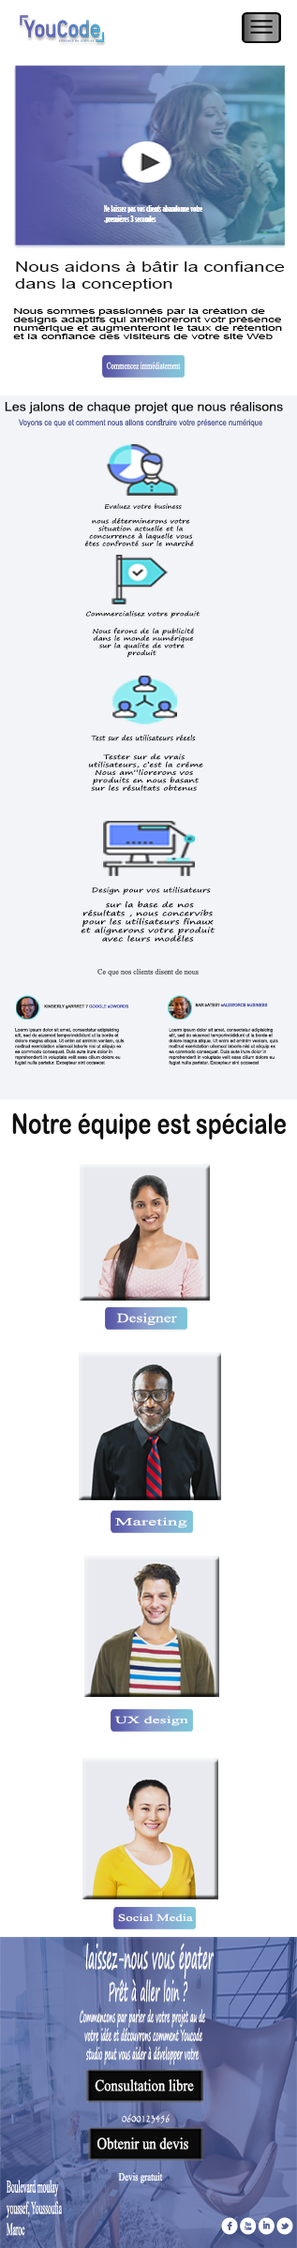
<style>
.page{position:relative;width:297px;height:2248px;background:#ffffff}
.page>*{position:absolute;margin:0}
.t1{font:8.5px "BernardMT-Condensed";color:#ffffff;scale:0.72 1}
.t2{font:14.2px "ArialMT";color:#111112;scale:1.34 1}
.t3{font:7px "ArialMT";color:#000000;scale:1.81 1}
.t4{font:9.5px "TimesNewRomanPSMT";color:#fdfafa;scale:0.67 1}
.t5{font:12.4px "ArialMT";color:#111112;scale:1.08 1}
.t6{font:8.3px "ArialMT";color:#464f98;scale:0.87 1}
.t7{font:5.8px "SegoePrint";color:#111112;scale:1.2 1}
.t8{font:6.3px "SegoePrint";color:#111112;scale:1.2 1}
.t9{font:6.1px "SegoePrint";color:#111112;scale:1.26 1}
.t10{font:6.9px "SegoePrint";color:#111112}
.t11{font:6.5px "SegoePrint";color:#111112;scale:1.34 1}
.t12{font:6.5px "SegoePrint";color:#111112;scale:1.31 1}
.t13{font:7.1px "SegoePrint";color:#111112;scale:1.39 1}
.t14{font:7.4px "TimesNewRomanPSMT";color:#3d3d3f}
.t15{font:4.1px "ArialMT";color:#1e2ea7}
.t16{font:4.1px "ArialMT";color:#030303}
.t17{font:4.6px "ArialMT";color:#111112}
.t18{font:27.9px "ArialRoundedMTBold";color:#111112;scale:0.8 1}
.t19{font:27.9px "SegoePrint";color:#111112;scale:0.8 1}
.t20{font:12.8px "TimesNewRomanPSMT";color:#fdfafa;scale:1.29 1}
.t21{font:10.8px "TimesNewRomanPSMT";color:#fdfafa;scale:1.83 1}
.t22{font:9.9px "TimesNewRomanPSMT";color:#fdfafa;scale:1.71 1}
.t23{font:9.9px "TimesNewRomanPSMT";color:#fdfafa;scale:1.42 1}
.t24{font:30.9px "SegoePrint";color:#ffffff;scale:0.34 1}
.t25{font:26px "SegoePrint";color:#ffffff;scale:0.34 1}
.t26{font:15.6px "SegoePrint";color:#ffffff;scale:0.34 1}
.t27{font:16px "TimesNewRomanPSMT";color:#fdfafa;scale:0.86 1}
.t28{font:10.9px "Papyrus-Regular";color:#ffffff;scale:0.77 1}
.t29{font:16.1px "TimesNewRomanPSMT";color:#fdfafa;scale:0.86 1}
.t30{font:11.3px "TimesNewRomanPSMT";color:#ffffff;scale:0.74 1}
.t31{font:17.7px "TimesNewRomanPSMT";color:#ffffff;scale:0.39 1}
</style>
<div class="page">
<p class="t1" style="left:104px;top:205px;width:99px;height:18px;text-align:right">Ne laissez pas vos clients abandonne votre<br> premières 3 secondes.</p>
<p class="t2" style="left:15px;top:261px;width:270px;height:30px;text-align:right">Nous aidons à bâtir la confiance<br> dans la conception</p>
<p class="t3" style="left:13px;top:307px;width:269px;height:32px;text-align:right">Nous sommes passionnés par la création de<br>designs adaptifs qui amélioreront votr présence<br> numérique et augmenteront le taux de rétention<br> et la confiance des visiteurs de votre site Web</p>
<p class="t4" style="left:107px;top:362px;width:74px;height:7px">Commencez immédiatement</p>
<p class="t5" style="left:5px;top:402px;width:278px;height:12px">Les jalons de chaque projet que nous réalisons</p>
<p class="t6" style="left:19px;top:419px;width:243px;height:8px">Voyons ce que et comment nous allons construire votre présence numérique</p>
<p class="t7" style="left:104px;top:503px;width:78px;height:6px">Evaluez votre business</p>
<p class="t8" style="left:84px;top:517px;width:110px;height:29px;text-align:center">nous déterminerons votre <br>situation actuelle et la <br>concurrence à laquelle vous <br>étes confronté sur le marché</p>
<p class="t9" style="left:85px;top:610px;width:116px;height:9px">Commercialisez votre produit</p>
<p class="t9" style="left:93px;top:628px;width:101px;height:30px;text-align:center">Nous ferons de la publicité<br>dans le monde numérique<br> sur la qualite de votre<br> produit</p>
<p class="t10" style="left:91px;top:735px;width:105px;height:6px">Test sur des utilisateurs réeels</p>
<p class="t11" style="left:88px;top:753px;width:115px;height:38px;text-align:center">Tester sur de vrais<br>utilisateurs, c’est la créme <br>Nous am”liorerons vos<br>produits en nous basant <br>sur les résultats obtenus</p>
<p class="t12" style="left:92px;top:887px;width:119px;height:8px">Design pour vos utilisateurs</p>
<p class="t13" style="left:81px;top:901px;width:135px;height:41px;text-align:center">sur la base de nos <br>résultats , nous concervibs<br>pour les utilisateurs finaux<br>et alignerons votre produit<br>avec leurs modéles</p>
<p class="t14" style="left:97px;top:969px;width:102px;height:7px">Ce que nos clients disent de nous</p>
<p class="t15" style="left:44px;top:1005px;width:84px;height:4px">KIMBERLY gARRRET ? GOOGLE aDWORDS</p>
<p class="t15" style="left:195px;top:1003px;width:73px;height:4px"><span class="t16">BAR bATES? </span>sALESfORCE bUSINESS</p>
<p class="t17" style="left:15px;top:1028px;width:110px;height:38px;text-align:right">Loerm ipsum dolor sit amet, consectetur adipisicing<br> elit, sed do eiusmod temporincididunt ut la borde et <br>dolore magna aliqua. Ut enim ad aminim veniam, quis<br> nostrud exerictation ullamcol laboris nisi ut aliquip ex<br>ea commodo consequat. Duis aute irure dolor in<br> reprehenderit in voluptate velit esse cillum dolore eu <br>fugiat nulla pariatur. Excepteur sint occaecat</p>
<p class="t17" style="left:169px;top:1028px;width:109px;height:38px;text-align:right">Loerm ipsum dolor sit amet, consectetur adipisicing<br> elit, sed do eiusmod temporincididunt ut la borde et <br>dolore magna aliqua. Ut enim ad aminim veniam, quis<br> nostrud exerictation ullamcol laboris nisi ut aliquip ex<br>ea commodo consequat. Duis aute irure dolor in<br> reprehenderit in voluptate velit esse cillum dolore eu <br>fugiat nulla pariatur. Excepteur sint occaecat</p>
<p class="t18" style="left:12px;top:1113px;width:274px;height:27px"><span class="t19"><br></span>Notre équipe est spéciale</p>
<p class="t20" style="left:117px;top:1313px;width:60px;height:12px">Designer</p>
<p class="t21" style="left:115px;top:1517px;width:72px;height:11px">Mareting</p>
<p class="t22" style="left:114px;top:1716px;width:74px;height:10px">UX design</p>
<p class="t23" style="left:118px;top:1914px;width:75px;height:8px">Social Media</p>
<p class="t24" style="left:85px;top:1943px;width:129px;height:36px">laissez-nous vous épater</p>
<p class="t25" style="left:109px;top:1979px;width:78px;height:24px">? Prêt à aller loin</p>
<p class="t26" style="left:80px;top:2009px;width:125px;height:56px;text-align:center">Commencons par parler de votre projet au de<br>votre idée et découvrons comment Youcode <br>studio peut vous aider à développer votre</p>
<p class="t27" style="left:95px;top:2080px;width:99px;height:12px">Consultation libre</p>
<p class="t28" style="left:122px;top:2114px;width:48px;height:10px">0600123456</p>
<p class="t29" style="left:97px;top:2138px;width:91px;height:12px">Obtenir un devis</p>
<p class="t30" style="left:118px;top:2172px;width:45px;height:12px">Devis gratuit</p>
<p class="t31" style="left:7px;top:2180px;width:55px;height:56px;text-align:right">Boulevard moulay<br>youssef, Youssoufia<br>Maroc</p>
</div>
